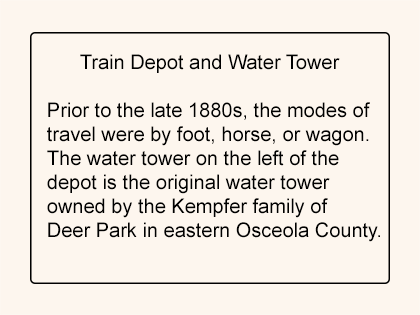
<style>
.page{position:relative;width:420px;height:315px;background:#fdf6ee}
.page>*{position:absolute;margin:0}
.t1{font:20px "ArialMT";color:#000000}
</style>
<div class="page">
<p class="t1" style="left:47px;top:54px;width:333px;height:188px">Train Depot and Water Tower<br><br>Prior to the late 1880s, the modes of<br>travel were by foot, horse, or wagon.<br>The water tower on the left of the <br>depot is the original water tower <br>owned by the Kempfer family of <br>Deer Park in eastern Osceola County.</p>
</div>
